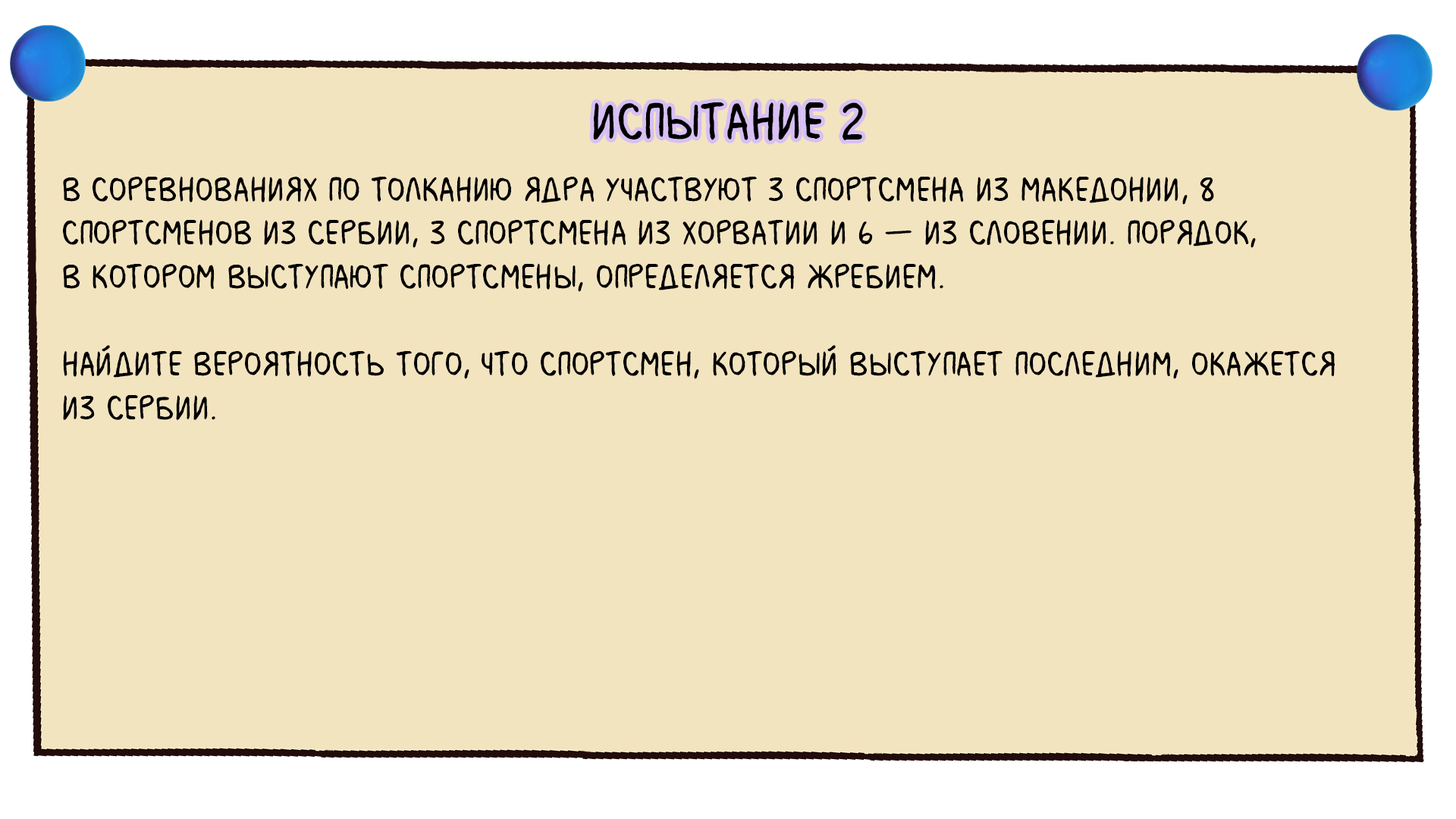
<style>
.page{position:relative;width:1456px;height:819px;background:#f3e4c0}
.page>*{position:absolute;margin:0}
.t1{font:54.6px "MilkMustacheBB";color:#000000}
.t2{font:36.4px "MilkMustacheBB";color:#000000}
</style>
<div class="page">
<p class="t1" style="left:593px;top:102px;width:270px;height:39px">испытание 2</p>
<p class="t2" style="left:63px;top:176px;width:1272px;height:244px">В соревнованиях по толканию ядра участвуют 3 спортсмена из Македонии, 8 <br>спортсменов из Сербии, 3 спортсмена из Хорватии и 6 — из Словении. Порядок, <br>в котором выступают спортсмены, определяется жребием. <br><br>Найдите вероятность того, что спортсмен, который выступает последним, окажется <br>из Сербии.</p>
</div>
